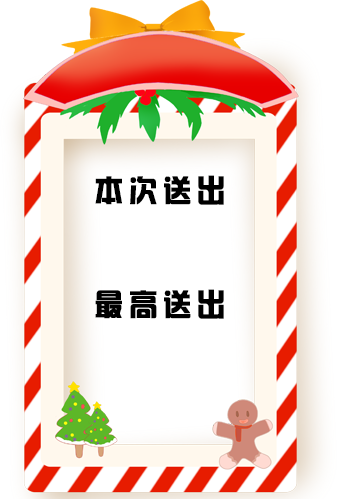
<style>
.page{position:relative;width:337px;height:499px;background:#ffffff}
.page>*{position:absolute;margin:0}
.t1{font:30px "¹ã½Ý¾ÓÃÔÄã×Ö¿â";letter-spacing:0.2em;color:#000000;text-transform:uppercase;font-weight:bold;scale:0.93 1}
</style>
<div class="page">
<p class="t1" style="left:95px;top:175px;width:129px;height:30px">本次送出</p>
<p class="t1" style="left:95px;top:289px;width:129px;height:30px">最高送出</p>
</div>
